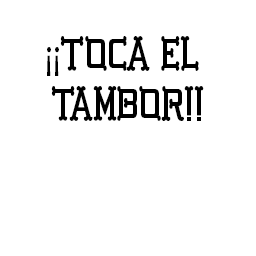
<style>
.page{position:relative;width:256px;height:256px;background:#ffffff}
.page>*{position:absolute;margin:0}
.t1{font:41.9px "GBGoldenBones-Regular";color:#000000;scale:0.79 1}
.t2{font:41.9px "MyriadPro-Regular";color:#000000;scale:0.79 1}
</style>
<div class="page">
<p class="t1" style="left:47px;top:36px;width:157px;height:85px;text-align:center"><span class="t2">¡¡</span>TOCA el <br>TAMBOR!!</p>
</div>
